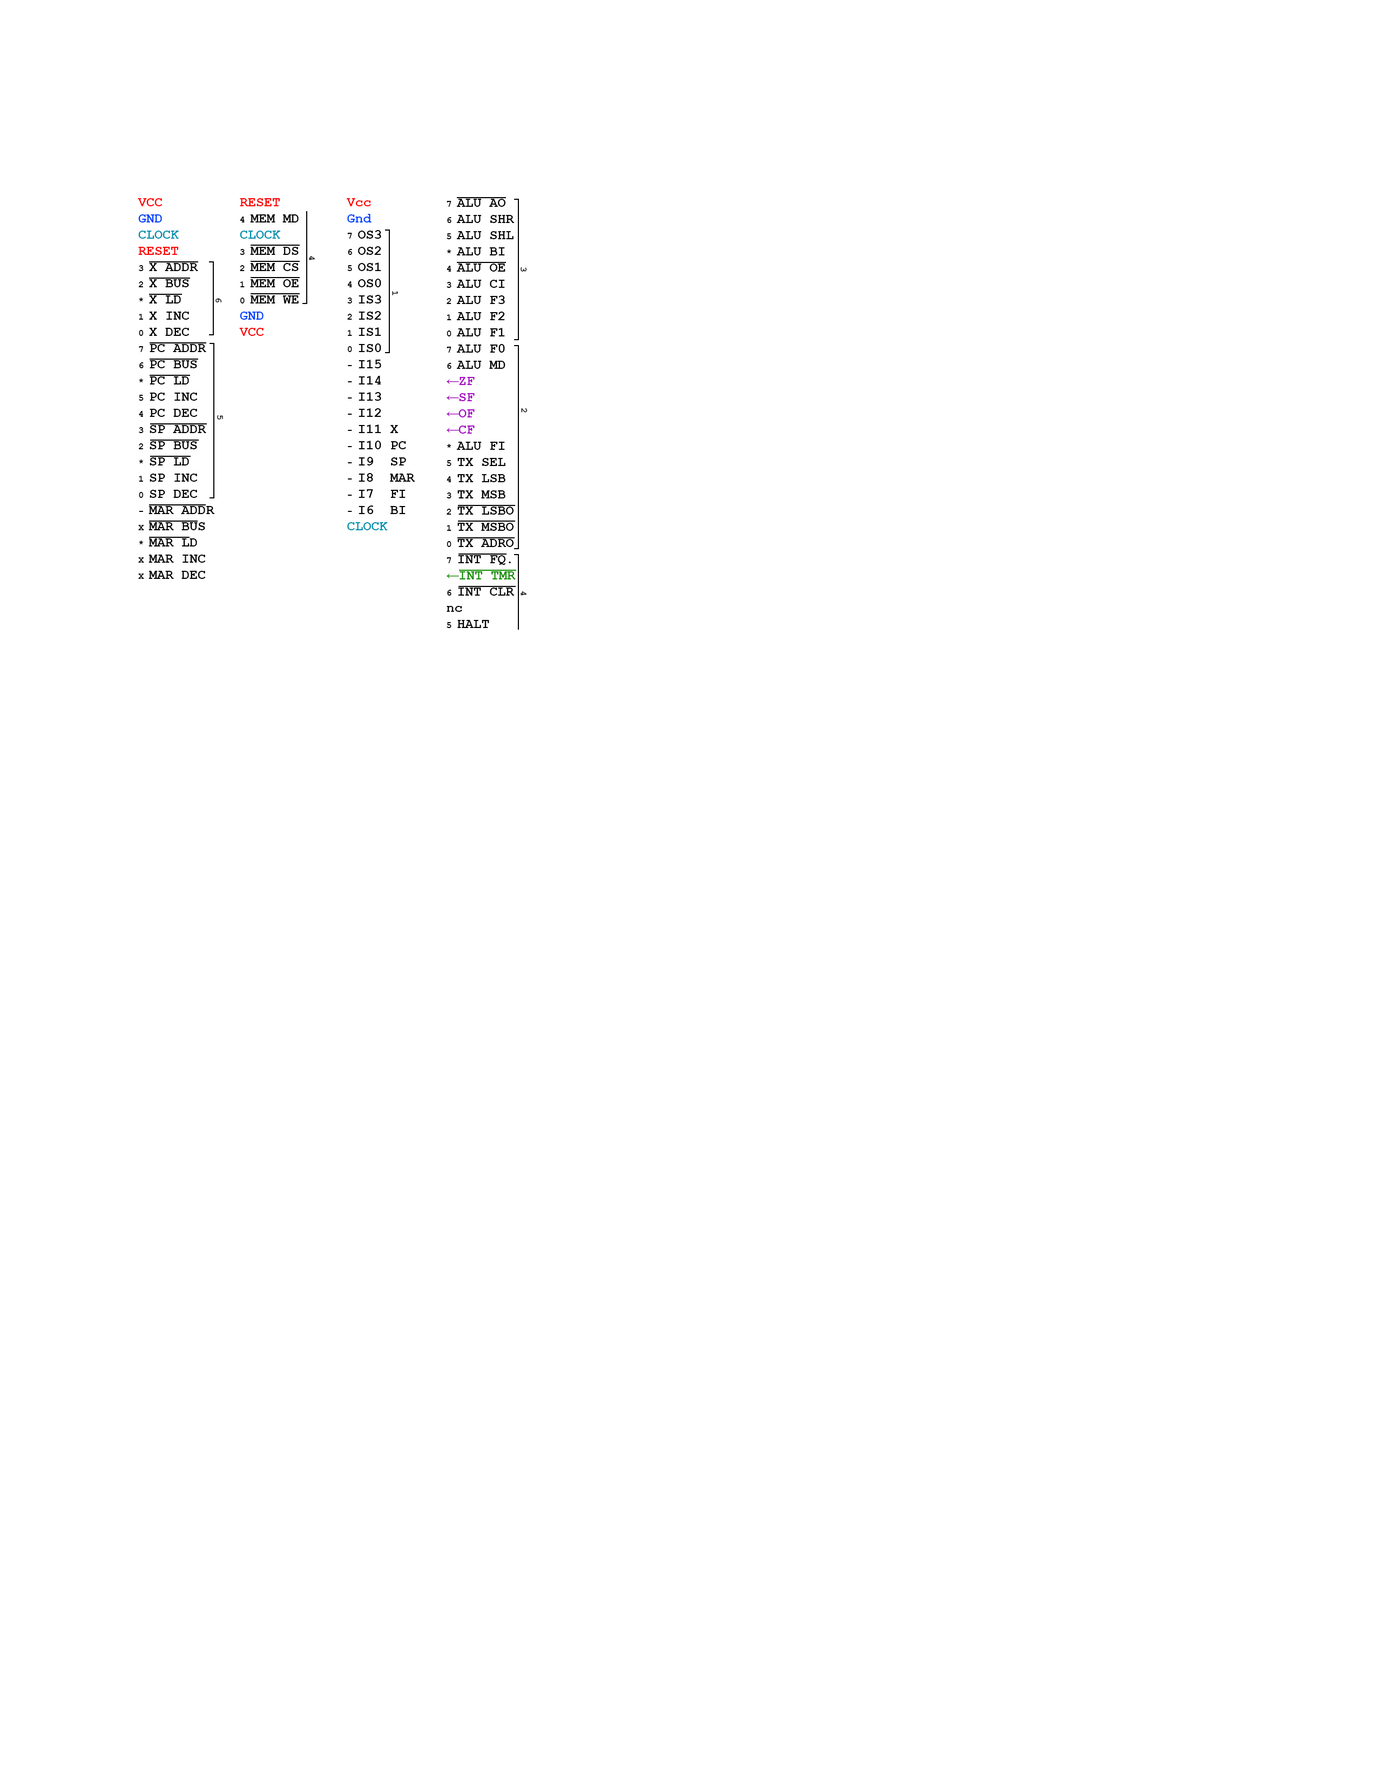
<style>
.page{position:relative;width:1377px;height:1782px;background:#ffffff}
.page>*{position:absolute;margin:0}
.t1{font:13.5px/16.2px "CourierNewPS-BoldMT";color:#010101}
.t2{font:13.5px/16.2px "CourierNewPS-BoldMT";color:#ff0000}
.t3{font:13.5px/16.2px "CourierNewPS-BoldMT";color:#0042fe}
.t4{font:13.5px/16.2px "CourierNewPS-BoldMT";color:#0091b0}
.t5{font:9px/16.2px "CourierNewPS-BoldMT";color:#010101}
.t6{font:13.5px/16.2px "CourierNewPS-BoldMT";color:#0092b1}
.t7{font:20.2px/16.2px "CourierNewPS-BoldMT";color:#a50ac1}
.t8{font:13.5px/16.2px "CourierNewPS-BoldMT";color:#a50ac1}
.t9{font:20.2px/16.2px "CourierNewPS-BoldMT";color:#118e00}
.t10{font:13.5px/16.2px "CourierNewPS-BoldMT";color:#118e00}
.t11{font:9px "CourierNewPS-BoldMT";color:#000000}
</style>
<div class="page">
<p class="t1" style="left:138px;top:198px;width:77px;height:381px"><span class="t2">VCC<br></span><span class="t3">GND<br></span><span class="t4">CLOCK<br></span><span class="t2">RESET<br></span><span class="t5">3 </span>X ADDR<br><span class="t5">2 </span>X BUS<br><span class="t5">* </span>X LD<br><span class="t5">1 </span>X INC<br><span class="t5">0 </span>X DEC<br><span class="t5">7 </span>PC ADDR<br><span class="t5">6 </span>PC BUS<br><span class="t5">* </span>PC LD<br><span class="t5">5 </span>PC INC<br><span class="t5">4 </span>PC DEC<br><span class="t5">3 </span>SP ADDR<br><span class="t5">2 </span>SP BUS<br><span class="t5">* </span>SP LD<br><span class="t5">1 </span>SP INC<br><span class="t5">0 </span>SP DEC<br><span class="t5">- </span>MAR ADDR<br><span class="t5">X </span>MAR BUS<br><span class="t5">* </span>MAR LD<br><span class="t5">X </span>MAR INC<br><span class="t5">X </span>MAR DEC</p>
<p class="t1" style="left:239px;top:198px;width:60px;height:138px"><span class="t2">RESET<br></span><span class="t5">4 </span>MEM MD<br><span class="t4">CLOCK<br></span><span class="t5">3 </span>MEM DS<br><span class="t5">2 </span>MEM CS<br><span class="t5">1 </span>MEM OE<br><span class="t5">0 </span>MEM WE<br><span class="t3">GND<br></span><span class="t2">VCC</span></p>
<p class="t1" style="left:346px;top:198px;width:69px;height:332px"><span class="t2">Vcc<br></span><span class="t3">Gnd<br></span><span class="t5">7 </span>OS3<br><span class="t5">6 </span>OS2<br><span class="t5">5 </span>OS1<br><span class="t5">4 </span>OS0<br><span class="t5">3 </span>IS3<br><span class="t5">2 </span>IS2<br><span class="t5">1 </span>IS1<br><span class="t5">0 </span>IS0<br><span class="t5">- </span>I15<br><span class="t5">- </span>I14<br><span class="t5">- </span>I13<br><span class="t5">- </span>I12<br><span class="t5">- </span>I11 X<br><span class="t5">- </span>I10 PC<br><span class="t5">- </span>I9  SP<br><span class="t5">- </span>I8  MAR<br><span class="t5">- </span>I7  FI<br><span class="t5">- </span>I6  BI<br><span class="t6">CLOCK</span></p>
<p class="t1" style="left:447px;top:199px;width:69px;height:429px"><span class="t5">7 </span>ALU AO<br><span class="t5">6 </span>ALU SHR<br><span class="t5">5 </span>ALU SHL<br><span class="t5">* </span>ALU BI<br><span class="t5">4 </span>ALU OE<br><span class="t5">3 </span>ALU CI<br><span class="t5">2 </span>ALU F3<br><span class="t5">1 </span>ALU F2<br><span class="t5">0 </span>ALU F1<br><span class="t5">7 </span>ALU F0<br><span class="t5">6 </span>ALU MD<br><span class="t7">←</span><span class="t8">ZF<br></span><span class="t7">←</span><span class="t8">SF<br></span><span class="t7">←</span><span class="t8">OF<br></span><span class="t7">←</span><span class="t8">CF<br></span><span class="t5">* </span>ALU FI<br><span class="t5">5 </span>TX SEL<br><span class="t5">4 </span>TX LSB<br><span class="t5">3 </span>TX MSB<br><span class="t5">2 </span>TX LSBO<br><span class="t5">1 </span>TX MSBO<br><span class="t5">0 </span>TX ADRO<br><span class="t5">7 </span>INT FQ.<br><span class="t9">←</span><span class="t10">INT TMR<br></span><span class="t5">6 </span>INT CLR<br>nc<br><span class="t5">5 </span>HALT</p>
<p class="t11" style="left:309px;top:256px;width:6px;height:4px;rotate:90deg">4</p>
<p class="t11" style="left:521px;top:267px;width:6px;height:5px;rotate:90deg">3</p>
<p class="t11" style="left:392px;top:291px;width:6px;height:4px;rotate:90deg">1</p>
<p class="t11" style="left:215px;top:298px;width:7px;height:5px;rotate:90deg">6</p>
<p class="t11" style="left:521px;top:408px;width:7px;height:5px;rotate:90deg">2</p>
<p class="t11" style="left:217px;top:415px;width:6px;height:5px;rotate:90deg">5</p>
<p class="t11" style="left:521px;top:591px;width:5px;height:5px;rotate:90deg">4</p>
</div>
